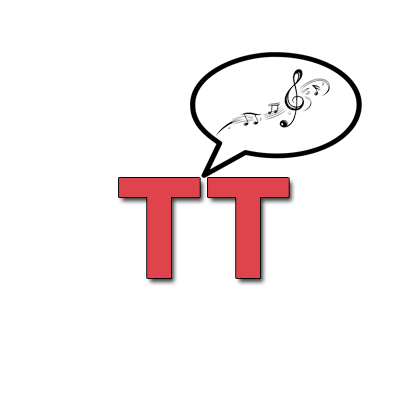
<style>
.page{position:relative;width:400px;height:400px;background:#ffffff}
.page>*{position:absolute;margin:0}
.t1{font:149px "MyriadPro-Bold";color:#df444c;scale:1.04 1}
</style>
<div class="page">
<p class="t1" style="left:119px;top:178px;width:170px;height:100px">TT</p>
</div>
